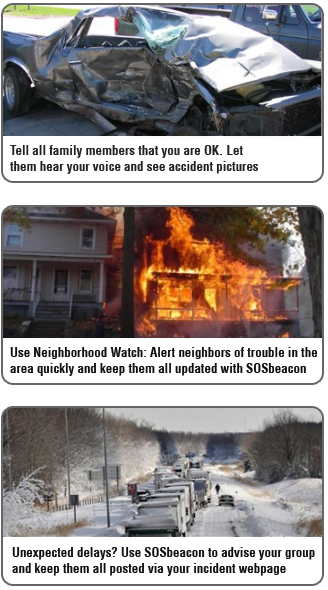
<style>
.page{position:relative;width:328px;height:590px;background:#ffffff}
.page>*{position:absolute;margin:0}
.t1{font:12.9px "HelveticaLT-Condensed-Bold";color:#222222}
.t2{font:12.9px "HelveticaLT-Condensed-Bold";color:#111111}
</style>
<div class="page">
<p class="t1" style="left:10px;top:145px;width:248px;height:29px">Tell all family members that you are OK. Let <br>them hear your voice and see accident pictures</p>
<p class="t2" style="left:10px;top:347px;width:308px;height:29px">Use Neighborhood Watch: Alert neighbors of trouble in the<br>area quickly and keep them all updated with SOSbeacon</p>
<p class="t2" style="left:12px;top:547px;width:303px;height:29px">Unexpected delays? Use SOSbeacon to advise your group<br>and keep them all posted via your incident webpage</p>
</div>
